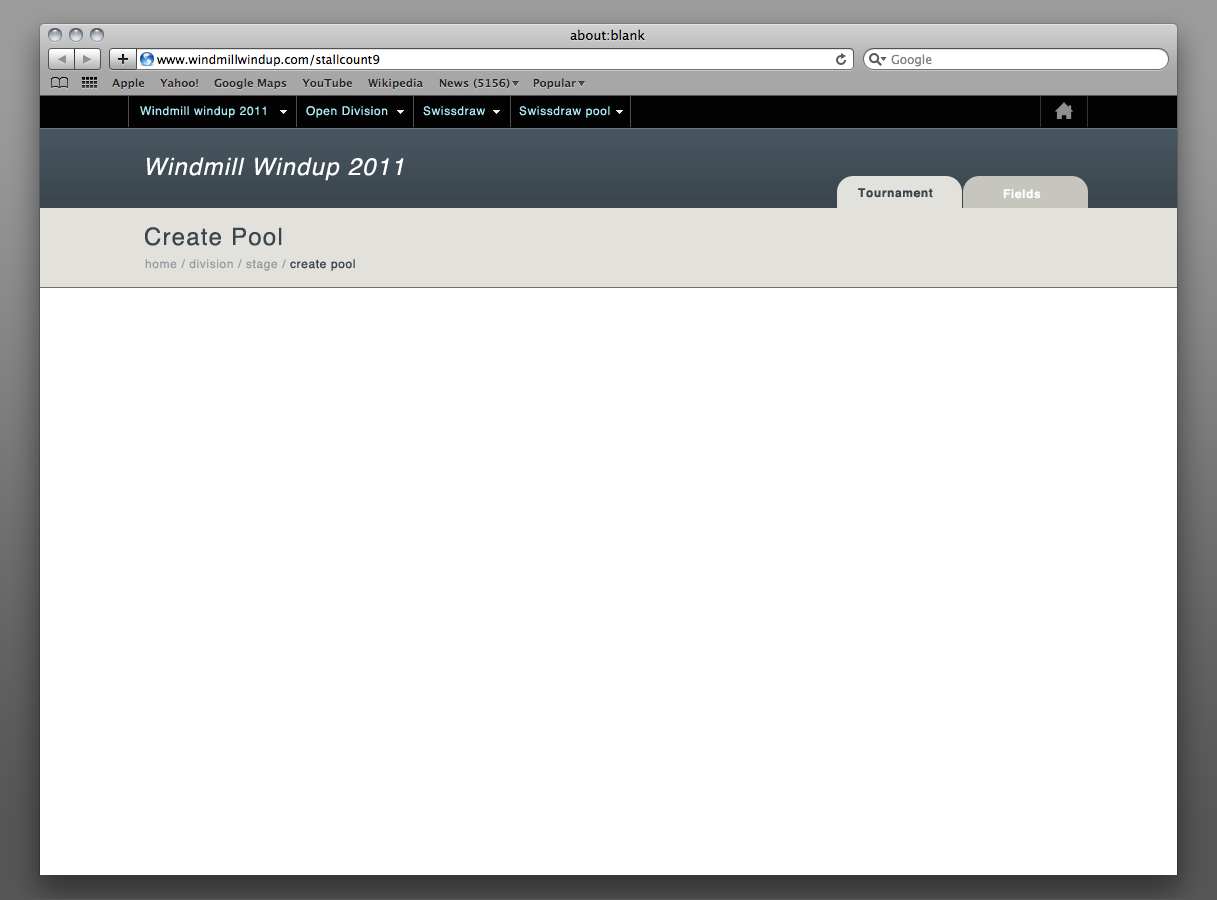
<style>
.page{position:relative;width:1217px;height:900px;background:#ffffff}
.page>*{position:absolute;margin:0}
.t1{font:12px "Helvetica";letter-spacing:0.05em;color:#a7ebf6}
.t2{font:24px "Helvetica-Oblique";letter-spacing:0.05em;color:#ffffff}
.t3{font:12px "Helvetica-Bold";letter-spacing:0.05em;color:#3b454d}
.t4{font:12px "Helvetica-Bold";letter-spacing:0.05em;color:#fcfffd}
.t5{font:24px "Helvetica";letter-spacing:0.05em;color:#3b454d}
.t6{font:12px "Helvetica";letter-spacing:0.05em;color:#979da1}
.t7{font:12px "Helvetica";letter-spacing:0.05em;color:#3b454d}
</style>
<div class="page">
<p class="t1" style="left:140px;top:106px;width:126px;height:12px">Windmill windup 2011</p>
<p class="t1" style="left:306px;top:106px;width:82px;height:12px">Open Division</p>
<p class="t1" style="left:423px;top:106px;width:62px;height:10px">Swissdraw</p>
<p class="t1" style="left:519px;top:106px;width:91px;height:12px">Swissdraw pool</p>
<p class="t2" style="left:147px;top:157px;width:257px;height:24px">Windmill Windup 2011</p>
<p class="t3" style="left:858px;top:188px;width:75px;height:10px">Tournament</p>
<p class="t4" style="left:1003px;top:189px;width:38px;height:10px">Fields</p>
<p class="t5" style="left:145px;top:227px;width:137px;height:19px">Create Pool</p>
<p class="t6" style="left:145px;top:259px;width:210px;height:12px">home / division / stage /<span class="t7"> create pool</span></p>
</div>
